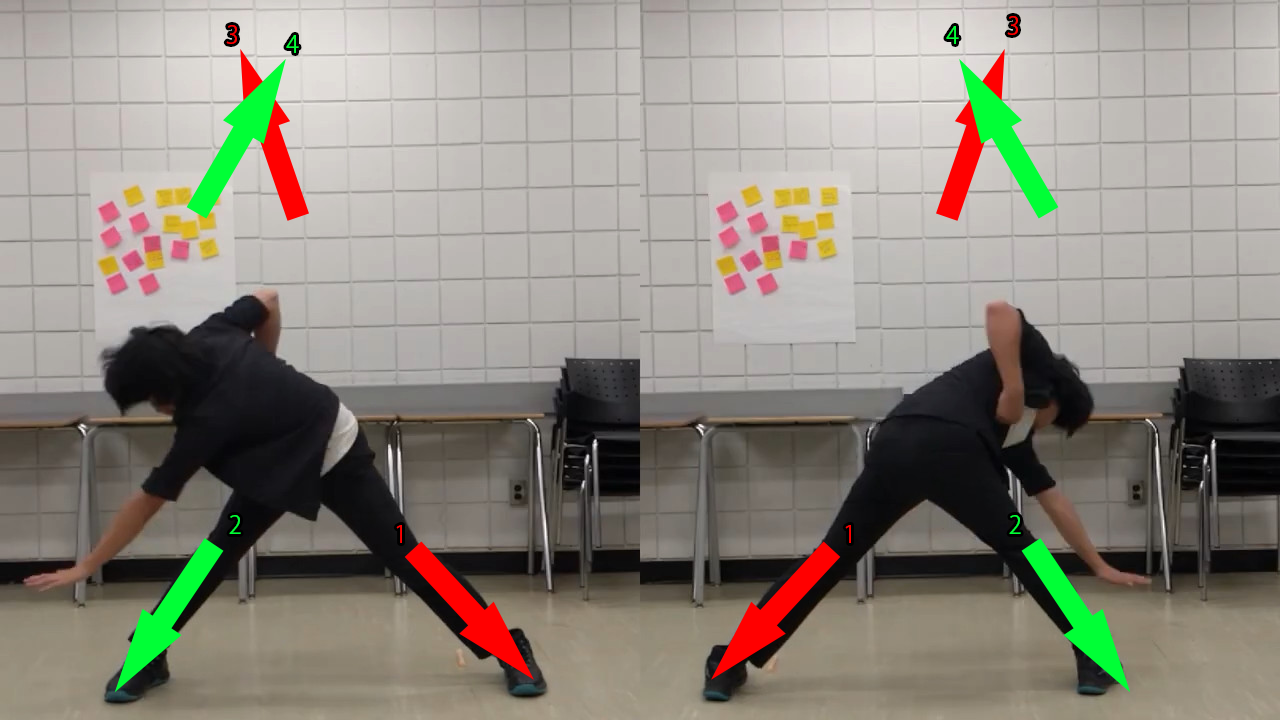
<style>
.page{position:relative;width:1280px;height:720px}
.page>*{position:absolute;margin:0}
.t1{font:24px "KozGoPr6N-Regular";color:#ff0000}
.t2{font:24px "KozGoPr6N-Regular";color:#00ff36}
</style>
<div class="page">
<p class="t1" style="left:1007px;top:16px;width:11px;height:19px">3</p>
<p class="t1" style="left:226px;top:25px;width:11px;height:19px">3</p>
<p class="t2" style="left:946px;top:26px;width:13px;height:18px">4</p>
<p class="t2" style="left:286px;top:35px;width:13px;height:18px">4</p>
<p class="t2" style="left:229px;top:515px;width:12px;height:19px">2</p>
<p class="t2" style="left:1009px;top:515px;width:12px;height:19px">2</p>
<p class="t1" style="left:396px;top:525px;width:6px;height:18px">1</p>
<p class="t1" style="left:845px;top:525px;width:6px;height:18px">1</p>
</div>
